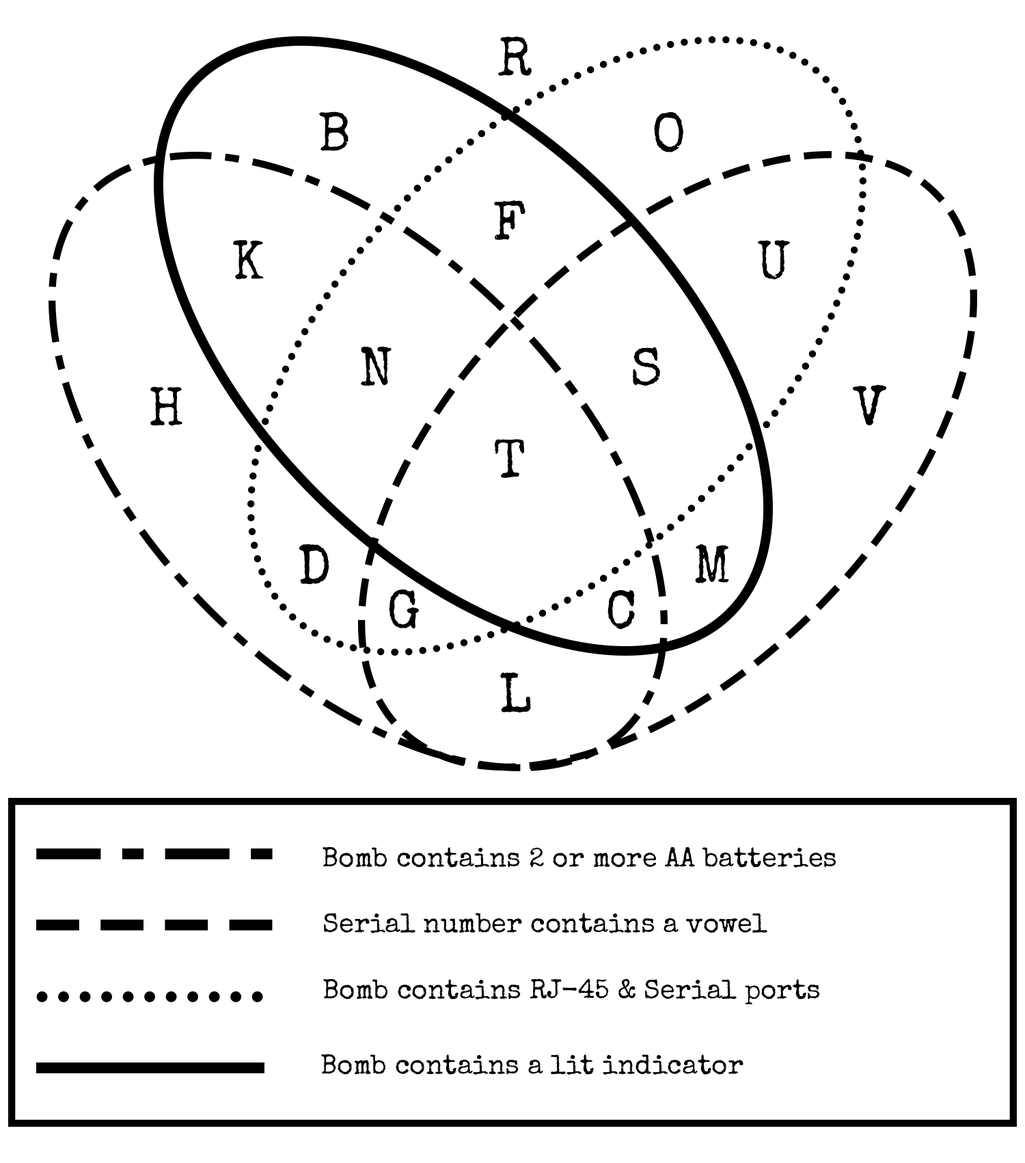
<style>
.page{position:relative;width:1025px;height:1163px;background:#ffffff}
.page>*{position:absolute;margin:0}
.t1{font:54.7px "SpecialElite-Regular";color:#000000}
.t2{font:27.3px "SpecialElite-Regular";color:#000000}
</style>
<div class="page">
<p class="t1" style="left:498px;top:36px;width:34px;height:40px">R</p>
<p class="t1" style="left:319px;top:111px;width:30px;height:40px">B</p>
<p class="t1" style="left:654px;top:111px;width:30px;height:41px">O</p>
<p class="t1" style="left:494px;top:200px;width:32px;height:40px">F</p>
<p class="t1" style="left:233px;top:240px;width:31px;height:40px">K</p>
<p class="t1" style="left:758px;top:240px;width:32px;height:40px">U</p>
<p class="t1" style="left:361px;top:347px;width:31px;height:39px">N</p>
<p class="t1" style="left:633px;top:347px;width:27px;height:39px">S</p>
<p class="t1" style="left:150px;top:386px;width:33px;height:40px">H</p>
<p class="t1" style="left:853px;top:385px;width:34px;height:41px">V</p>
<p class="t1" style="left:495px;top:439px;width:29px;height:39px">T</p>
<p class="t1" style="left:299px;top:544px;width:31px;height:41px">D</p>
<p class="t1" style="left:695px;top:543px;width:34px;height:40px">M</p>
<p class="t1" style="left:389px;top:589px;width:30px;height:40px">G</p>
<p class="t1" style="left:608px;top:590px;width:27px;height:39px">C</p>
<p class="t1" style="left:500px;top:672px;width:31px;height:40px">L</p>
<p class="t2" style="left:323px;top:846px;width:514px;height:22px">Bomb contains 2 or more AA batteries</p>
<p class="t2" style="left:324px;top:913px;width:444px;height:20px">Serial number contains a vowel</p>
<p class="t2" style="left:323px;top:978px;width:497px;height:26px">Bomb contains RJ-45 &amp; Serial ports</p>
<p class="t2" style="left:321px;top:1053px;width:423px;height:22px">Bomb contains a lit indicator</p>
</div>
